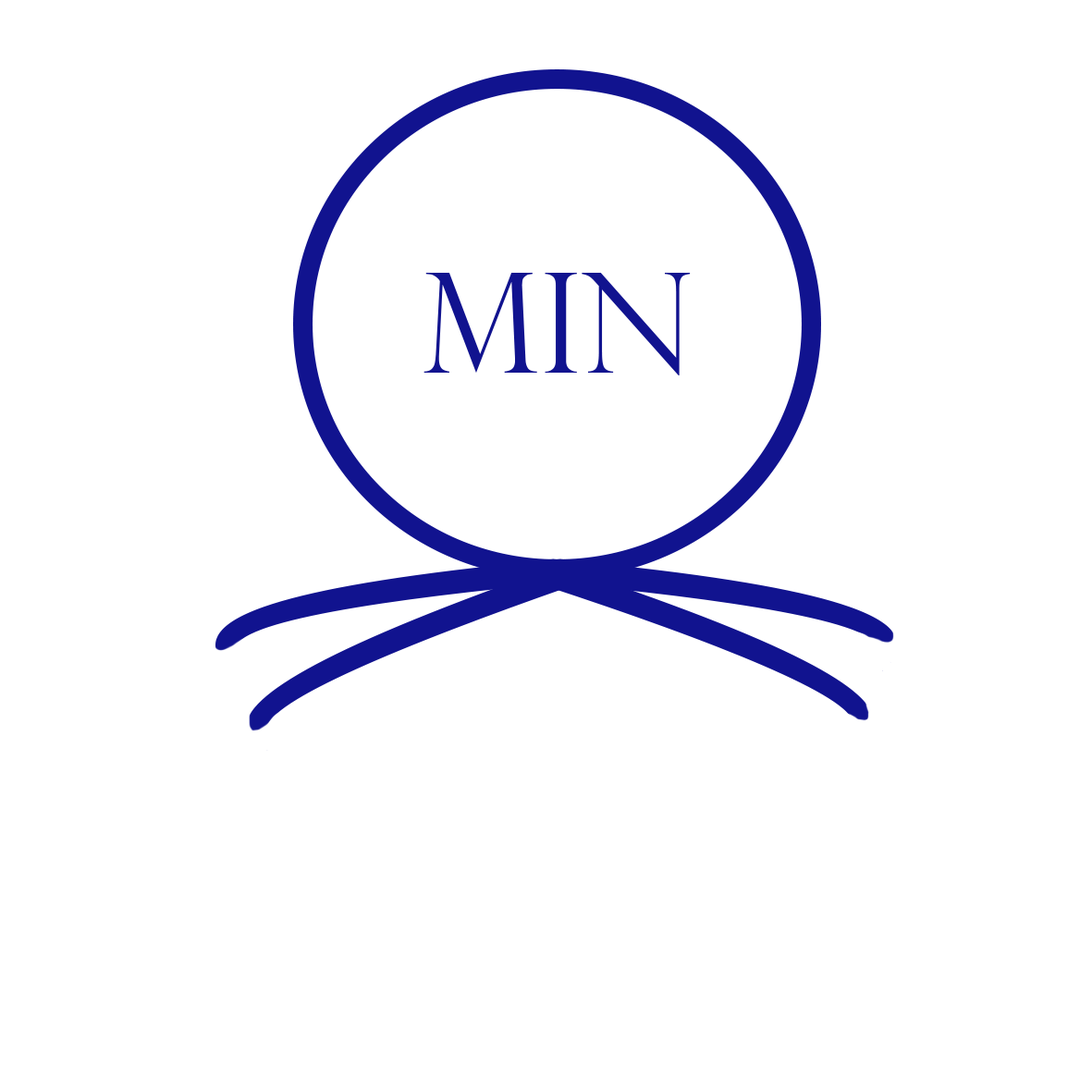
<style>
.page{position:relative;width:1092px;height:1092px;background:#ffffff}
.page>*{position:absolute;margin:0}
.t1{font:138.7px "PerpetuaTitlingMT-Light";color:#11138f}
</style>
<div class="page">
<p class="t1" style="left:423px;top:273px;width:268px;height:102px">MIN</p>
</div>
